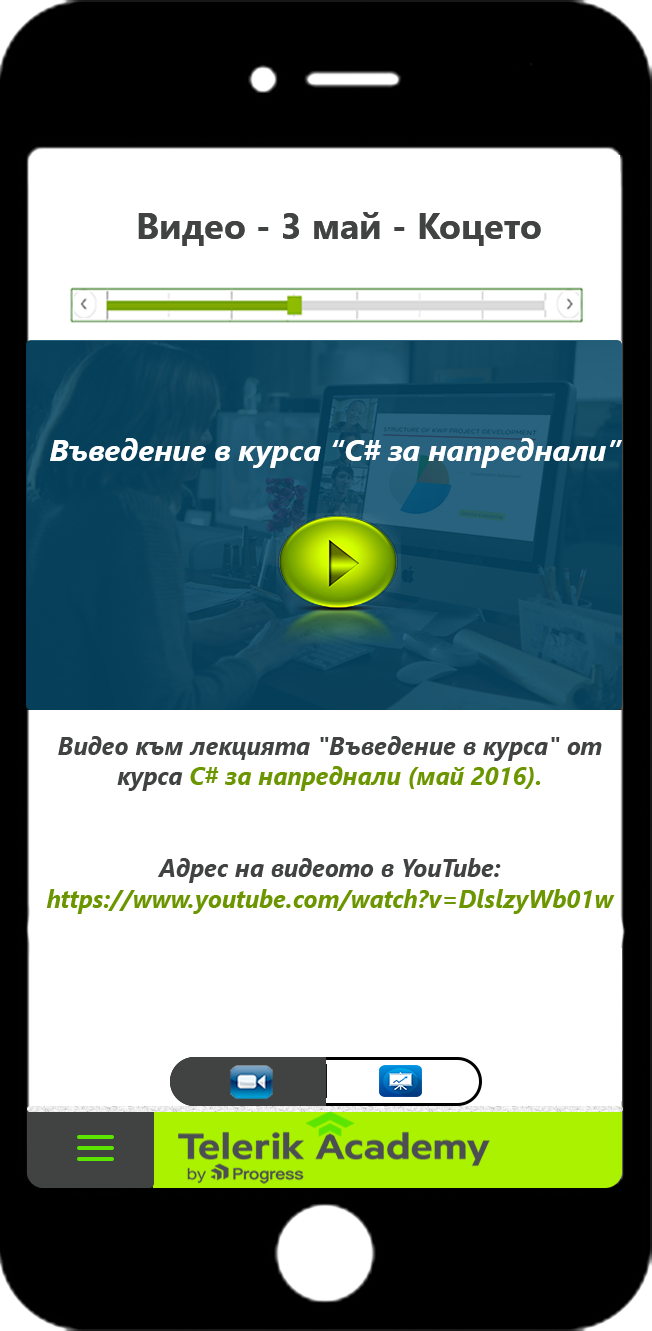
<style>
.page{position:relative;width:652px;height:1331px;background:#ffffff}
.page>*{position:absolute;margin:0}
.t1{font:36px "SegoeUI-Bold";color:#414242}
.t2{font:30px "SegoeUI-BoldItalic";color:#ffffff}
.t3{font:25.4px "SegoeUI-BoldItalic";color:#414242;scale:0.94 1}
.t4{font:25.4px "SegoeUI-BoldItalic";color:#6c9600;scale:0.94 1}
</style>
<div class="page">
<p class="t1" style="left:138px;top:212px;width:403px;height:34px">Видео - 3 май - Коцето</p>
<p class="t2" style="left:50px;top:438px;width:572px;height:30px">Въведение в курса “C# за напреднали”</p>
<p class="t3" style="left:46px;top:736px;width:569px;height:178px;text-align:center">Видео към лекцията "Въведение в курса" от курса <span class="t4">C# за напреднали (май 2016).<br><br><br></span>Адрес на видеото в YouTube: <span class="t4">https://www.youtube.com/watch?v=DlslzyWb01w</span></p>
</div>
